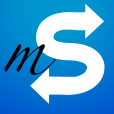
<style>
.page{position:relative;width:114px;height:114px;background:#ffffff}
.page>*{position:absolute;margin:0}
.t1{font:50px "Zapfino";color:#000000}
</style>
<div class="page">
<p class="t1" style="left:4px;top:44px;width:52px;height:31px">m</p>
</div>
